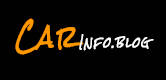
<style>
.page{position:relative;width:166px;height:80px;background:#010101}
.page>*{position:absolute;margin:0}
.t1{font:15.1px "RockSalt";letter-spacing:0.1em;color:#ffffff;font-weight:bold;font-style:italic;scale:0.71 1}
.t2{font:30.2px "RockSalt";letter-spacing:0.1em;color:#ff9700;font-weight:bold;font-style:italic;scale:0.71 1}
</style>
<div class="page">
<p class="t1" style="left:15px;top:18px;width:139px;height:37px"><span class="t2">Car</span>Info.blog</p>
</div>
